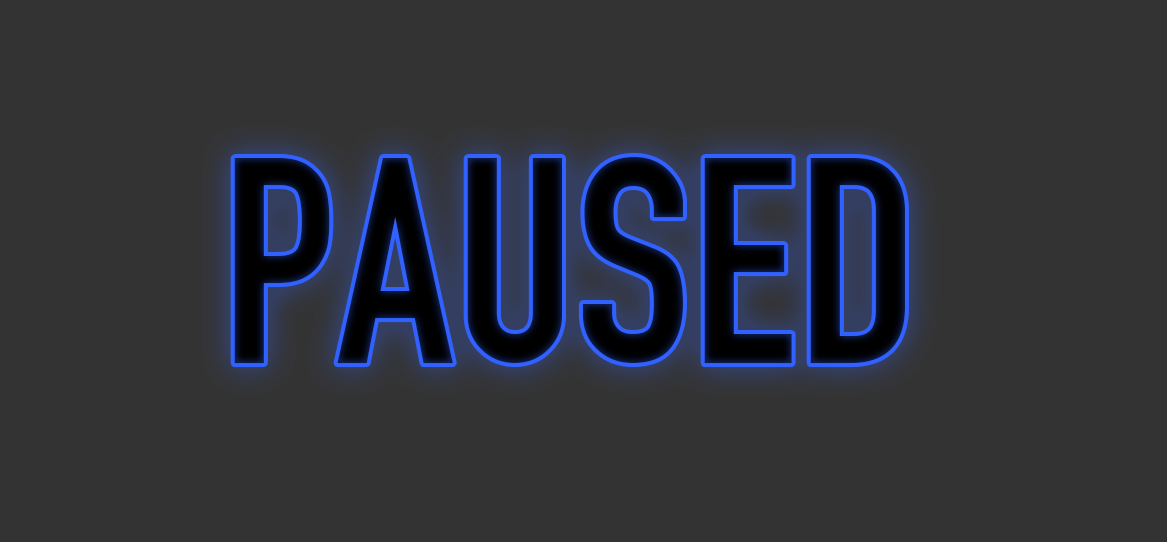
<style>
.page{position:relative;width:1167px;height:542px;background:#333333}
.page>*{position:absolute;margin:0}
.t1{font:285.8px "DINEngschrift";color:#010205}
</style>
<div class="page">
<p class="t1" style="left:234px;top:157px;width:671px;height:207px">PAUSED</p>
</div>
